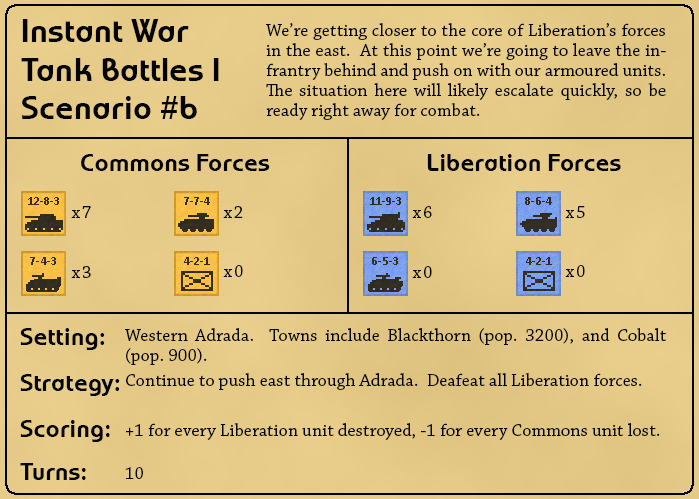
<style>
.page{position:relative;width:699px;height:499px}
.page>*{position:absolute;margin:0}
.t1{font:32px "WorldofWater-Regular";letter-spacing:0.01em;color:#030303}
.t2{font:18px/20px "ChaparralPro-Regular";letter-spacing:0.01em;color:#030303}
.t3{font:24px "WorldofWater-Regular";letter-spacing:0.01em;color:#030303}
.t4{font:18px "ChaparralPro-Regular";letter-spacing:0.1em;color:#030303}
.t5{font:18px "ChaparralPro-Regular";letter-spacing:0.01em;color:#030303}
</style>
<div class="page">
<p class="t1" style="left:21px;top:19px;width:198px;height:100px">Instant War<br>Tank Battles I<br>Scenario #6</p>
<p class="t2" style="left:266px;top:23px;width:400px;height:97px;text-align:justify">We’re getting closer to the core of Liberation’s forces in the east.  At this point we’re going to leave the infrantry behind and push on with our armoured units.  The situation here will likely escalate quickly, so be ready right away for combat.</p>
<p class="t3" style="left:81px;top:154px;width:189px;height:17px">Commons Forces</p>
<p class="t3" style="left:427px;top:154px;width:194px;height:17px">Liberation Forces</p>
<p class="t4" style="left:71px;top:206px;width:20px;height:12px">x7</p>
<p class="t4" style="left:223px;top:206px;width:20px;height:12px">x2</p>
<p class="t4" style="left:412px;top:206px;width:20px;height:12px">x6</p>
<p class="t4" style="left:565px;top:206px;width:20px;height:12px">x5</p>
<p class="t4" style="left:71px;top:266px;width:20px;height:12px">x3</p>
<p class="t4" style="left:223px;top:265px;width:20px;height:12px">x0</p>
<p class="t4" style="left:412px;top:266px;width:20px;height:12px">x0</p>
<p class="t4" style="left:565px;top:265px;width:20px;height:12px">x0</p>
<p class="t3" style="left:20px;top:328px;width:85px;height:22px">Setting:</p>
<p class="t2" style="left:125px;top:328px;width:541px;height:37px;text-align:justify">Western Adrada.  Towns include Blackthorn (pop. 3200), and Cobalt (pop. 900).</p>
<p class="t3" style="left:20px;top:374px;width:100px;height:22px">Strategy:</p>
<p class="t5" style="left:126px;top:373px;width:516px;height:17px">Continue to push east through Adrada.  Deafeat all Liberation forces.</p>
<p class="t3" style="left:20px;top:420px;width:90px;height:22px">Scoring:</p>
<p class="t5" style="left:126px;top:423px;width:534px;height:17px">+1 for every Liberation unit destroyed, -1 for every Commons unit lost.</p>
<p class="t3" style="left:20px;top:463px;width:66px;height:17px">Turns:</p>
<p class="t5" style="left:125px;top:467px;width:18px;height:12px">10</p>
</div>
